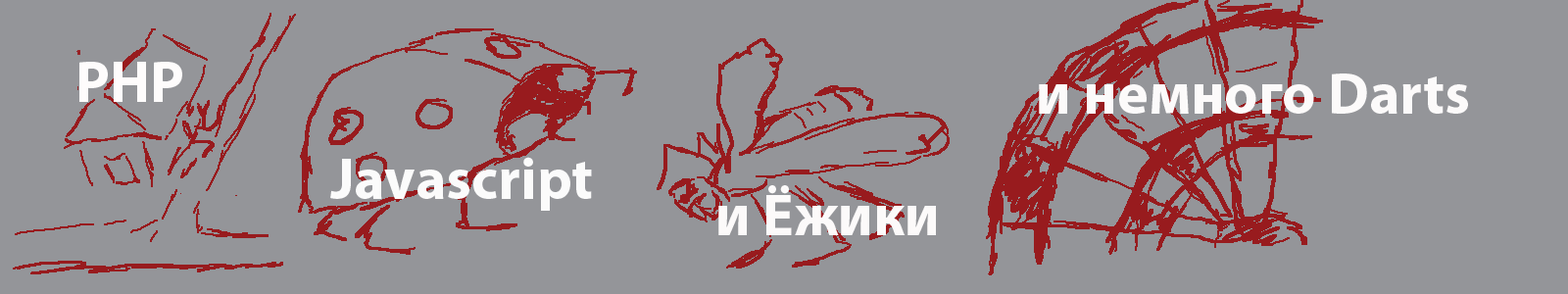
<style>
.page{position:relative;width:1568px;height:294px;background:#949599}
.page>*{position:absolute;margin:0}
.t1{font:58.8px "MyriadPro-Bold";color:#fefcfc}
.t2{font:58.8px "MyriadPro-Bold";color:#fcfafa}
.t3{font:58.8px "MyriadPro-Bold";color:#fbfbfb}
</style>
<div class="page">
<p class="t1" style="left:79px;top:62px;width:103px;height:40px">PHP</p>
<p class="t2" style="left:1039px;top:74px;width:429px;height:40px">и немного Darts</p>
<p class="t3" style="left:330px;top:157px;width:262px;height:54px">Javascript</p>
<p class="t2" style="left:718px;top:185px;width:218px;height:50px">и Ёжики</p>
</div>
